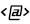
<style>
.page{position:relative;width:30px;height:24px;background:#ffffff}
.page>*{position:absolute;margin:0}
.t1{font:19.8px "Iceland-Regular";color:#000000;font-weight:bold;font-style:italic;scale:0.91 1}
</style>
<div class="page">
<p class="t1" style="left:0px;top:5px;width:30px;height:16px">&lt;@&gt;</p>
</div>
